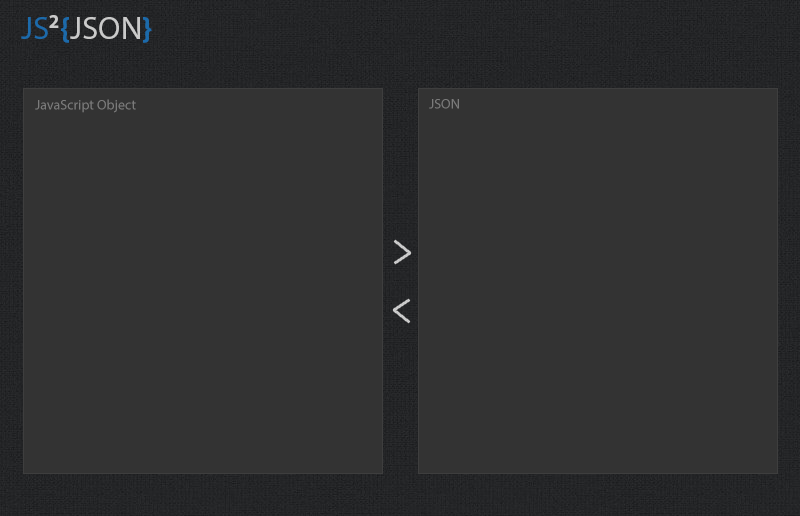
<style>
.page{position:relative;width:800px;height:516px;background:#333333}
.page>*{position:absolute;margin:0}
.t1{font:32.7px "MyriadPro-Regular";color:#cacaca}
.t2{font:32.7px "MyriadPro-Regular";color:#1c6aaa}
.t3{font:32.7px "MyriadPro-Bold";color:#cacaca}
.t4{font:32.7px "MyriadPro-Bold";color:#1c6aaa}
.t5{font:24px "MyriadPro-Regular";color:#7b7b7b}
</style>
<div class="page">
<p class="t1" style="left:21px;top:15px;width:131px;height:28px"><span class="t2">JS</span><span class="t3">2</span><span class="t4">{</span>JSON<span class="t4">}</span></p>
<p class="t5" style="left:35px;top:99px;width:101px;height:14px">JavaScript Object</p>
<p class="t5" style="left:429px;top:99px;width:30px;height:10px">JSON</p>
</div>
